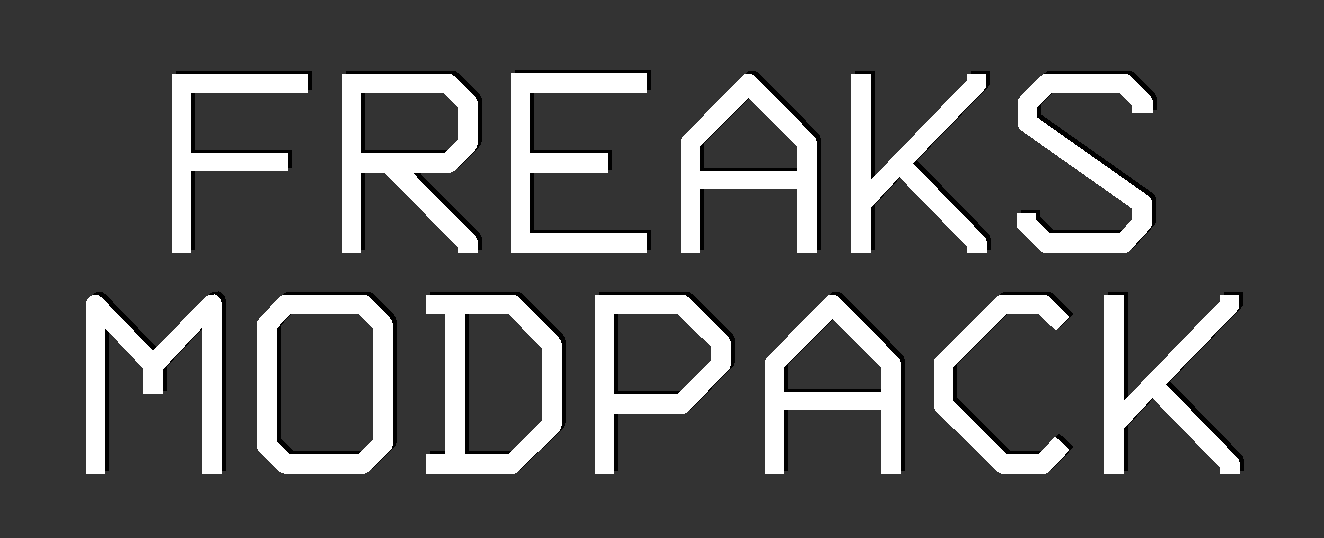
<style>
.page{position:relative;width:1324px;height:538px;background:#333333}
.page>*{position:absolute;margin:0}
.t1{font:326.7px/220.5px "3270-Regular";color:#ffffff}
</style>
<div class="page">
<p class="t1" style="left:86px;top:73px;width:1154px;height:401px;text-align:center">FREAKS<br>MODPACK</p>
</div>
